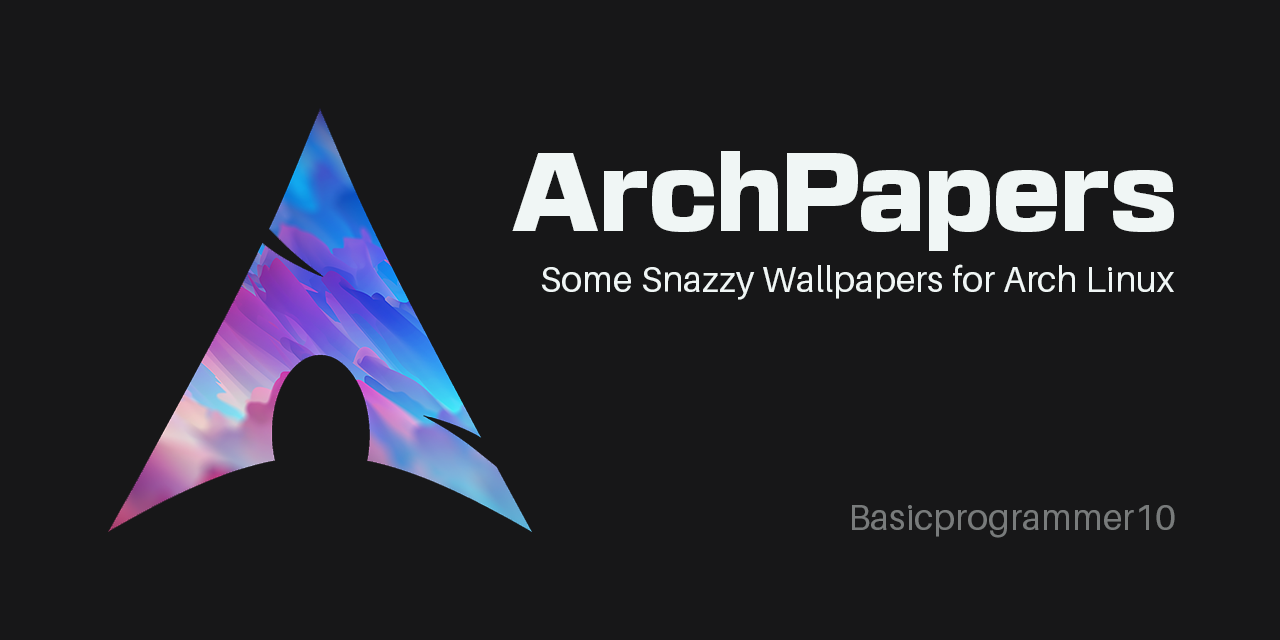
<style>
.page{position:relative;width:1280px;height:640px;background:#171718}
.page>*{position:absolute;margin:0}
.t1{font:100px "BasementGrotesque-Black";color:#f0f6f5}
.t2{font:36px "Aileron-Regular";color:#f0f6f5}
.t3{font:36px "Aileron-Regular";color:#787b7b}
</style>
<div class="page">
<p class="t1" style="left:512px;top:151px;width:662px;height:100px">ArchPapers</p>
<p class="t2" style="left:541px;top:264px;width:633px;height:36px">Some Snazzy Wallpapers for Arch Linux</p>
<p class="t3" style="left:852px;top:505px;width:323px;height:33px">Basicprogrammer10</p>
</div>
